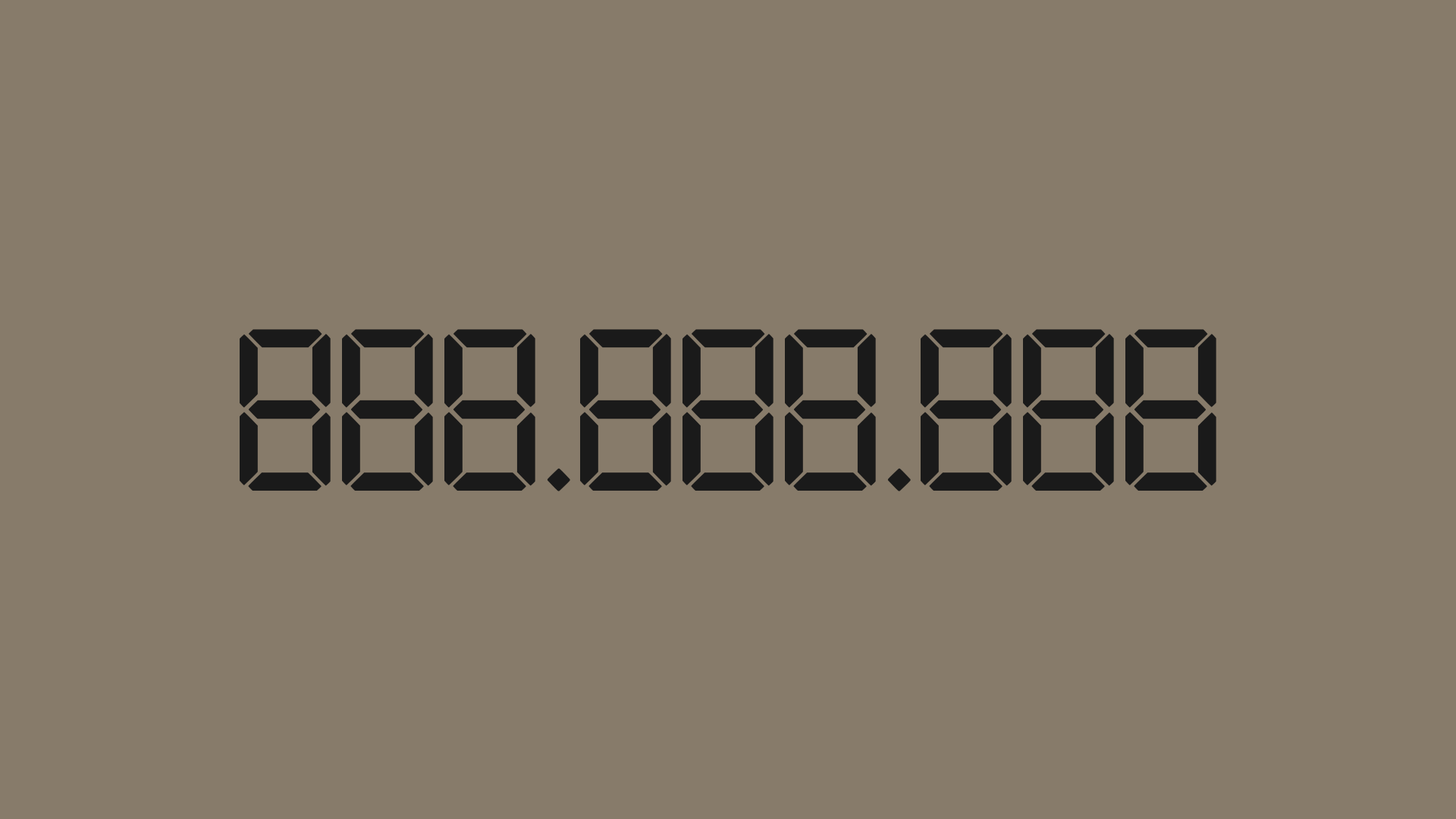
<style>
.page{position:relative;width:1456px;height:819px;background:#877b6a}
.page>*{position:absolute;margin:0}
.t1{font:231.6px "Open24DisplaySt";color:#1a1a1a}
</style>
<div class="page">
<p class="t1" style="left:240px;top:329px;width:976px;height:162px">888.888.888</p>
</div>
